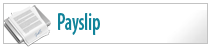
<style>
.page{position:relative;width:211px;height:47px;background:#ffffff}
.page>*{position:absolute;margin:0}
.t1{font:24px "MyriadPro-SemiboldCond";color:#11839a;scale:0.78 1}
</style>
<div class="page">
<p class="t1" style="left:58px;top:13px;width:42px;height:22px">Payslip</p>
</div>
